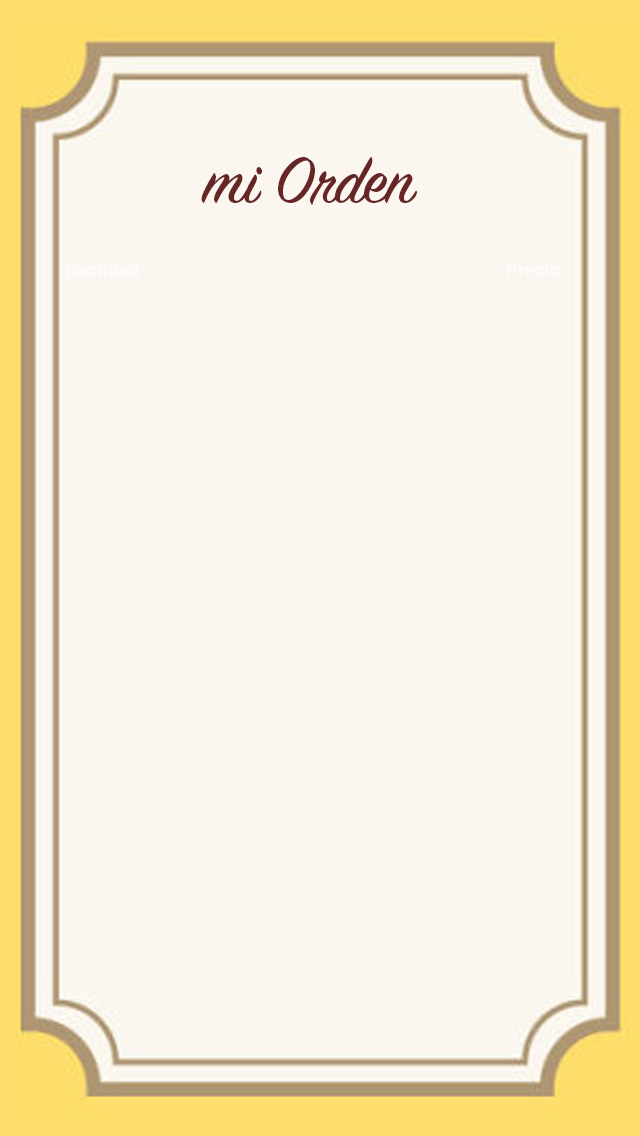
<style>
.page{position:relative;width:640px;height:1136px;background:#fbf6f0}
.page>*{position:absolute;margin:0}
.t1{font:71.1px "SignPainter-HouseScript";color:#672626}
.t2{font:18px "Helvetica-Bold";color:#fffbfb}
</style>
<div class="page">
<p class="t1" style="left:201px;top:157px;width:216px;height:48px">mi Orden</p>
<p class="t2" style="left:66px;top:263px;width:73px;height:13px">cantidad</p>
<p class="t2" style="left:506px;top:263px;width:54px;height:13px">Precio</p>
</div>
